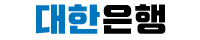
<style>
.page{position:relative;width:200px;height:40px;background:#ffffff}
.page>*{position:absolute;margin:0}
.t1{font:33px "Typo_SsangmunDong_B";letter-spacing:0.01em;color:#0076be}
.t2{font:33px "Typo_SsangmunDong_B";letter-spacing:0.01em;color:#010101}
</style>
<div class="page">
<p class="t1" style="left:36px;top:4px;width:130px;height:30px">대한<span class="t2">은행</span></p>
</div>
